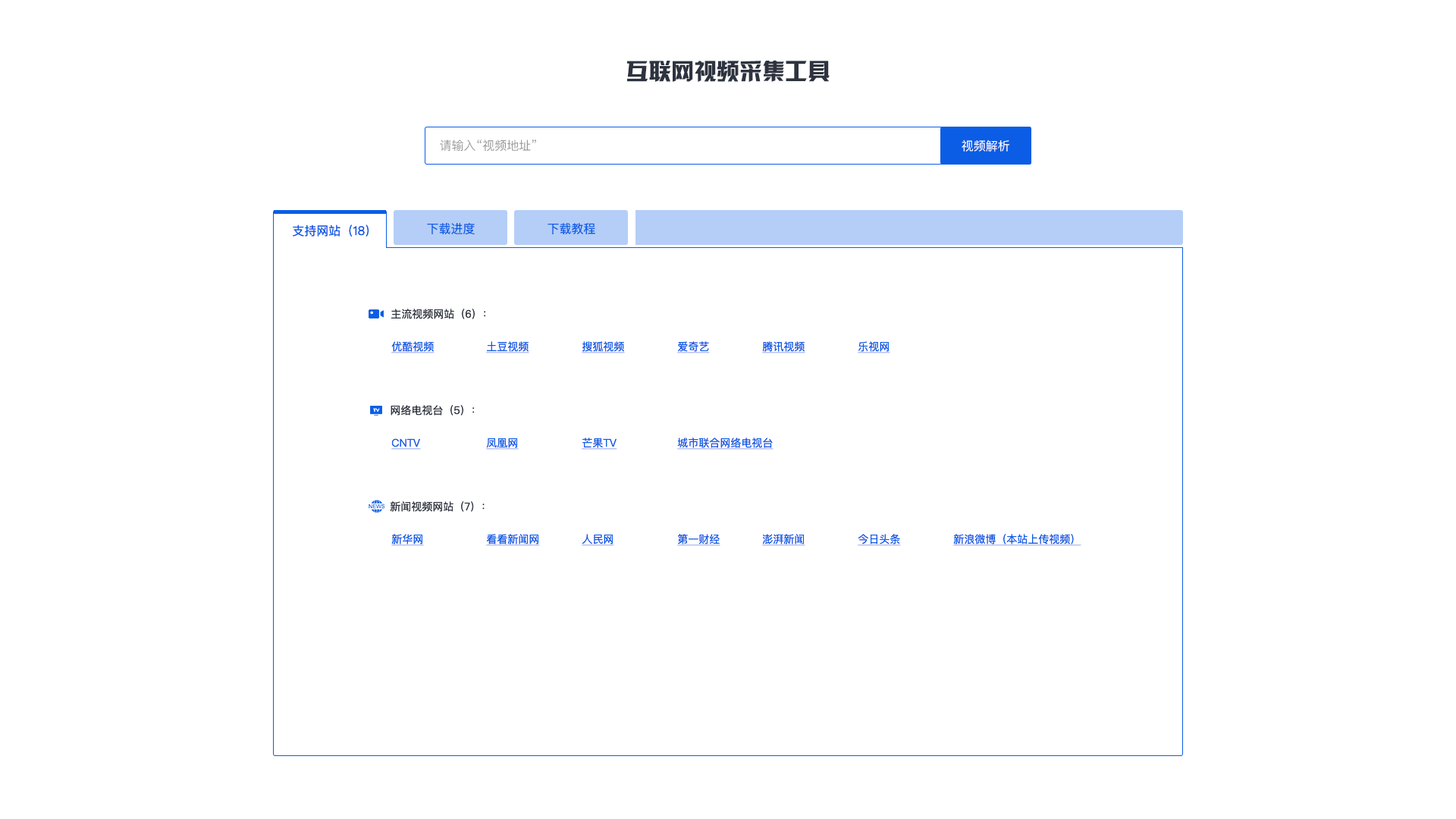
<style>
.page{position:relative;width:1456px;height:819px;background:#ffffff}
.page>*{position:absolute;margin:0}
.t1{font:22.7px "HYk2gj";color:#2d333f}
.t2{font:12.1px "PingFangSC-Regular";color:#999999}
.t3{font:12.1px "PingFangSC-Regular";color:#ffffff}
.t4{font:12.1px "PingFangSC-Regular";color:#0b5de5}
.t5{font:10.6px "PingFangSC-Regular";color:#2d333f}
.t6{font:10.6px "PingFangSC-Regular";color:#0b5de5;text-decoration:underline}
</style>
<div class="page">
<p class="t1" style="left:627px;top:60px;width:203px;height:22px">互联网视频采集工具</p>
<p class="t2" style="left:440px;top:140px;width:96px;height:12px">请输入“视频地址”</p>
<p class="t3" style="left:962px;top:140px;width:47px;height:12px">视频解析</p>
<p class="t4" style="left:293px;top:224px;width:76px;height:13px">支持网站（18）</p>
<p class="t4" style="left:427px;top:223px;width:48px;height:11px">下载进度</p>
<p class="t4" style="left:548px;top:223px;width:47px;height:11px">下载教程</p>
<p class="t5" style="left:391px;top:309px;width:95px;height:10px">主流视频网站（6）：</p>
<p class="t6" style="left:391px;top:341px;width:44px;height:12px">优酷视频</p>
<p class="t6" style="left:486px;top:341px;width:43px;height:12px">土豆视频</p>
<p class="t6" style="left:582px;top:341px;width:43px;height:12px">搜狐视频</p>
<p class="t6" style="left:677px;top:341px;width:33px;height:12px">爱奇艺</p>
<p class="t6" style="left:762px;top:341px;width:43px;height:12px">腾讯视频</p>
<p class="t6" style="left:858px;top:341px;width:32px;height:12px">乐视网</p>
<p class="t5" style="left:391px;top:405px;width:84px;height:11px">网络电视台（5）：</p>
<p class="t6" style="left:486px;top:438px;width:33px;height:12px">凤凰网</p>
<p class="t6" style="left:582px;top:438px;width:35px;height:12px">芒果TV</p>
<p class="t6" style="left:677px;top:438px;width:96px;height:12px">城市联合网络电视台</p>
<p class="t6" style="left:391px;top:438px;width:30px;height:12px">CNTV</p>
<p class="t5" style="left:390px;top:501px;width:95px;height:11px">新闻视频网站（7）：</p>
<p class="t6" style="left:391px;top:534px;width:33px;height:12px">新华网</p>
<p class="t6" style="left:486px;top:534px;width:54px;height:12px">看看新闻网</p>
<p class="t6" style="left:582px;top:534px;width:32px;height:12px">人民网</p>
<p class="t6" style="left:677px;top:534px;width:43px;height:12px">第一财经</p>
<p class="t6" style="left:762px;top:534px;width:43px;height:12px">澎湃新闻</p>
<p class="t6" style="left:858px;top:534px;width:43px;height:12px">今日头条</p>
<p class="t6" style="left:953px;top:534px;width:128px;height:12px">新浪微博（本站上传视频）</p>
</div>
